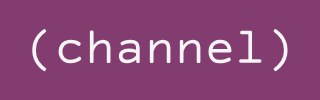
<style>
.page{position:relative;width:320px;height:100px;background:#833c70}
.page>*{position:absolute;margin:0}
.t1{font:50px "CourierPrimeCode-Regular";color:#f5f5f5}
</style>
<div class="page">
<p class="t1" style="left:32px;top:29px;width:256px;height:43px">(channel)</p>
</div>
